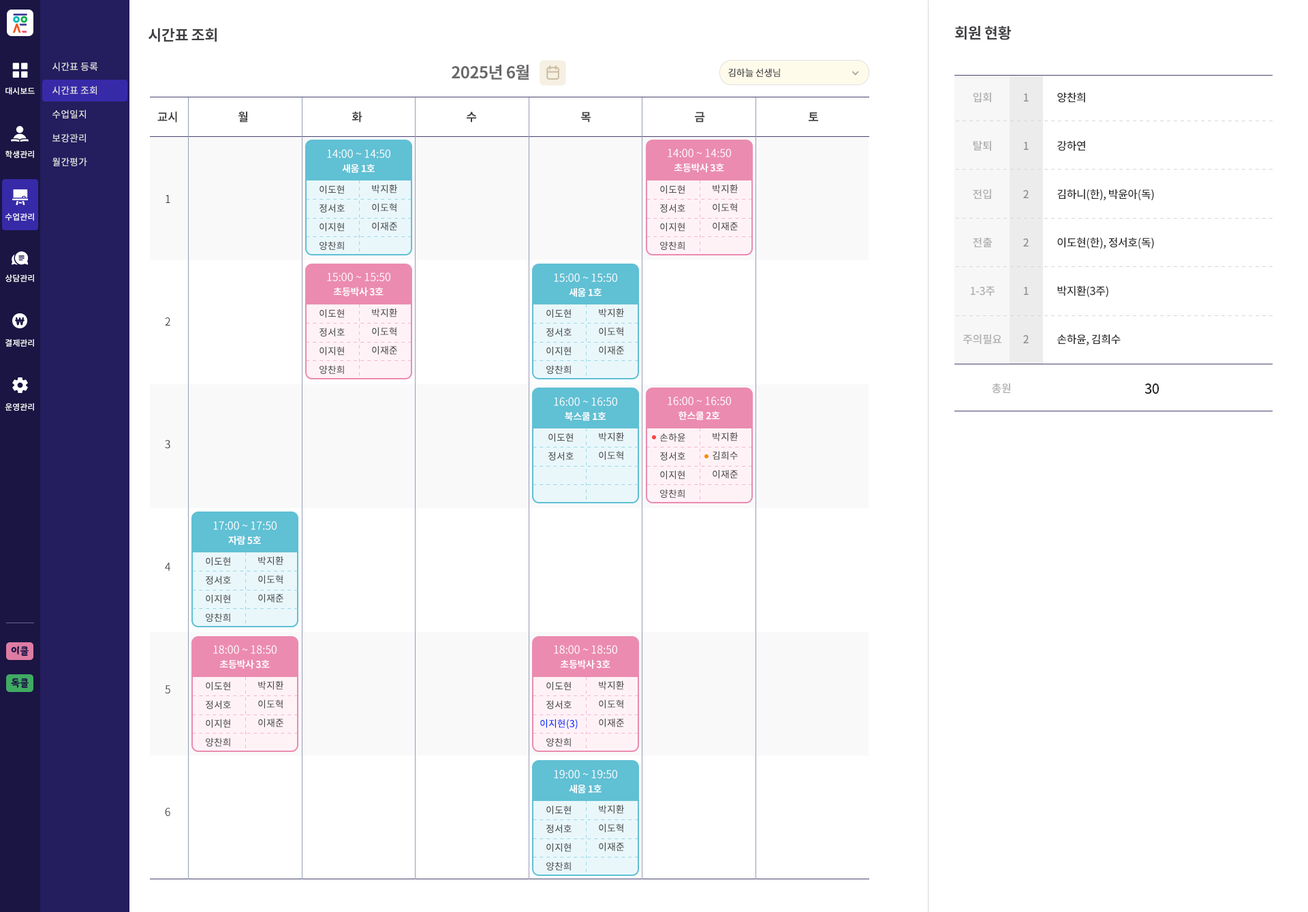
<style>
.page{position:relative;width:1308px;height:912px;background:#ffffff}
.page>*{position:absolute;margin:0}
.t1{font:15px "NotoSansCJKkr-Bold";letter-spacing:-0.025em;color:#3e3e43;text-transform:uppercase}
.t2{font:9.5px/23.8px "NotoSansCJKkr-Medium";color:#e1e1e1}
.t3{font:16.3px "NotoSansCJKkr-Bold";letter-spacing:-0.025em;color:#686868}
.t4{font:9.5px "NotoSansCJKkr-Medium";letter-spacing:-0.025em;color:#323232}
.t5{font:8.2px "NotoSansCJKkr-Medium";color:#ffffff}
.t6{font:10.9px/48.4px "NotoSansCJKkr-Medium";letter-spacing:-0.025em;color:#adadad}
.t7{font:10.9px/48.4px "NotoSansCJKkr-Medium";letter-spacing:-0.025em;color:#8f8f8f}
.t8{font:10.9px/48.4px "NotoSansCJKkr-Medium";letter-spacing:-0.025em;color:#323232}
.t9{font:11.6px "NotoSansCJKkr-Bold";letter-spacing:-0.025em;color:#404040}
.t10{font:10.9px "NotoSansCJKkr-DemiLight";color:#ffffff}
.t11{font:9.5px "NotoSansCJKkr-Bold";letter-spacing:-0.025em;color:#ffffff}
.t12{font:9.5px/18.7px "NotoSansCJKkr-Medium";color:#4d4d4d}
.t13{font:10.9px/122.6px "NotoSansCJKkr-Regular";letter-spacing:-0.025em;color:#404040}
.t14{font:10.9px "NotoSansCJKkr-Medium";letter-spacing:-0.025em;color:#adadad}
.t15{font:13.6px "NotoSansCJKkr-Medium";letter-spacing:-0.025em;color:#1f1f1f}
.t16{font:9.5px "YoonSoftSlime";color:#1a1543}
.t17{font:9.5px/18.7px "NotoSansCJKkr-Medium";color:#002aff}
</style>
<div class="page">
<p class="t1" style="left:148px;top:28px;width:69px;height:14px">시간표 조회</p>
<p class="t1" style="left:955px;top:26px;width:56px;height:14px">회원 현황</p>
<p class="t2" style="left:52px;top:62px;width:46px;height:104px">시간표 등록<br>시간표 조회<br>수업일지<br>보강관리<br>월간평가</p>
<p class="t3" style="left:452px;top:65px;width:77px;height:15px">2025년 6월</p>
<p class="t4" style="left:728px;top:68px;width:52px;height:9px">김하늘 선생님</p>
<p class="t5" style="left:5px;top:87px;width:30px;height:8px">대시보드</p>
<p class="t6" style="left:963px;top:92px;width:38px;height:253px;text-align:center">입회<br>탈퇴<br>전입<br>전출<br>1-3주<br>주의필요</p>
<p class="t7" style="left:1023px;top:93px;width:5px;height:250px;text-align:center">1<br>1<br>2<br>2<br>1<br>2</p>
<p class="t8" style="left:1057px;top:92px;width:97px;height:254px">양찬희<br>강하연<br>김하니(한), 박윤아(독)<br>이도현(한), 정서호(독)<br>박지환(3주)<br>손하윤, 김희수</p>
<p class="t9" style="left:157px;top:111px;width:20px;height:12px">교시</p>
<p class="t9" style="left:238px;top:111px;width:10px;height:12px">월</p>
<p class="t9" style="left:352px;top:111px;width:10px;height:12px">화</p>
<p class="t9" style="left:467px;top:112px;width:10px;height:11px">수</p>
<p class="t9" style="left:581px;top:112px;width:9px;height:11px">목</p>
<p class="t9" style="left:695px;top:112px;width:10px;height:11px">금</p>
<p class="t9" style="left:808px;top:112px;width:10px;height:9px">토</p>
<p class="t10" style="left:327px;top:149px;width:63px;height:9px">14:00 ~ 14:50</p>
<p class="t10" style="left:667px;top:148px;width:64px;height:9px">14:00 ~ 14:50</p>
<p class="t5" style="left:5px;top:151px;width:29px;height:7px">학생관리</p>
<p class="t11" style="left:342px;top:164px;width:33px;height:9px">새움 1호</p>
<p class="t11" style="left:674px;top:163px;width:50px;height:9px">초등박사 3호</p>
<p class="t12" style="left:319px;top:185px;width:26px;height:65px;text-align:center">이도현<br>정서호<br>이지현<br>양찬희</p>
<p class="t12" style="left:372px;top:184px;width:25px;height:47px;text-align:center">박지환<br>이도혁<br>이재준</p>
<p class="t12" style="left:660px;top:185px;width:25px;height:65px;text-align:center">이도현<br>정서호<br>이지현<br>양찬희</p>
<p class="t12" style="left:712px;top:184px;width:26px;height:47px;text-align:center">박지환<br>이도혁<br>이재준</p>
<p class="t13" style="left:165px;top:195px;width:5px;height:622px;text-align:center">1<br>2<br>3<br>4<br>5<br>6</p>
<p class="t5" style="left:5px;top:213px;width:29px;height:8px">수업관리</p>
<p class="t5" style="left:5px;top:274px;width:29px;height:8px">상담관리</p>
<p class="t10" style="left:327px;top:272px;width:63px;height:9px">15:00 ~ 15:50</p>
<p class="t10" style="left:554px;top:273px;width:63px;height:9px">15:00 ~ 15:50</p>
<p class="t11" style="left:333px;top:287px;width:50px;height:9px">초등박사 3호</p>
<p class="t11" style="left:569px;top:288px;width:32px;height:9px">새움 1호</p>
<p class="t12" style="left:319px;top:309px;width:26px;height:65px;text-align:center">이도현<br>정서호<br>이지현<br>양찬희</p>
<p class="t12" style="left:372px;top:308px;width:25px;height:47px;text-align:center">박지환<br>이도혁<br>이재준</p>
<p class="t12" style="left:546px;top:309px;width:25px;height:65px;text-align:center">이도현<br>정서호<br>이지현<br>양찬희</p>
<p class="t12" style="left:599px;top:308px;width:25px;height:47px;text-align:center">박지환<br>이도혁<br>이재준</p>
<p class="t5" style="left:5px;top:339px;width:29px;height:8px">결제관리</p>
<p class="t14" style="left:992px;top:383px;width:18px;height:11px">총원</p>
<p class="t15" style="left:1144px;top:383px;width:14px;height:11px">30</p>
<p class="t10" style="left:554px;top:397px;width:63px;height:9px">16:00 ~ 16:50</p>
<p class="t10" style="left:667px;top:396px;width:64px;height:9px">16:00 ~ 16:50</p>
<p class="t5" style="left:5px;top:403px;width:29px;height:8px">운영관리</p>
<p class="t11" style="left:565px;top:412px;width:41px;height:9px">북스쿨 1호</p>
<p class="t11" style="left:678px;top:411px;width:42px;height:9px">한스쿨 2호</p>
<p class="t12" style="left:548px;top:433px;width:25px;height:27px;text-align:center">이도현<br>정서호</p>
<p class="t12" style="left:599px;top:432px;width:25px;height:28px;text-align:center">박지환<br>이도혁</p>
<p class="t12" style="left:659px;top:433px;width:26px;height:65px;text-align:center">손하윤<br>정서호<br>이지현<br>양찬희</p>
<p class="t12" style="left:712px;top:432px;width:26px;height:47px;text-align:center">박지환<br>김희수<br>이재준</p>
<p class="t10" style="left:213px;top:521px;width:64px;height:9px">17:00 ~ 17:50</p>
<p class="t11" style="left:228px;top:535px;width:33px;height:10px">자람 5호</p>
<p class="t12" style="left:206px;top:557px;width:25px;height:65px;text-align:center">이도현<br>정서호<br>이지현<br>양찬희</p>
<p class="t12" style="left:258px;top:556px;width:25px;height:47px;text-align:center">박지환<br>이도혁<br>이재준</p>
<p class="t16" style="left:11px;top:646px;width:18px;height:10px">이클</p>
<p class="t10" style="left:213px;top:645px;width:64px;height:9px">18:00 ~ 18:50</p>
<p class="t10" style="left:554px;top:645px;width:63px;height:9px">18:00 ~ 18:50</p>
<p class="t11" style="left:219px;top:659px;width:51px;height:10px">초등박사 3호</p>
<p class="t11" style="left:560px;top:659px;width:50px;height:10px">초등박사 3호</p>
<p class="t16" style="left:11px;top:678px;width:18px;height:10px">독클</p>
<p class="t12" style="left:206px;top:682px;width:25px;height:64px;text-align:center">이도현<br>정서호<br>이지현<br>양찬희</p>
<p class="t12" style="left:258px;top:680px;width:25px;height:47px;text-align:center">박지환<br>이도혁<br>이재준</p>
<p class="t12" style="left:540px;top:682px;width:38px;height:64px;text-align:center">이도현<br>정서호<br><span class="t17">이지현(3)<br></span>양찬희</p>
<p class="t12" style="left:599px;top:680px;width:25px;height:47px;text-align:center">박지환<br>이도혁<br>이재준</p>
<p class="t10" style="left:554px;top:770px;width:63px;height:8px">19:00 ~ 19:50</p>
<p class="t11" style="left:569px;top:785px;width:32px;height:8px">새움 1호</p>
<p class="t12" style="left:546px;top:806px;width:25px;height:64px;text-align:center">이도현<br>정서호<br>이지현<br>양찬희</p>
<p class="t12" style="left:599px;top:804px;width:25px;height:47px;text-align:center">박지환<br>이도혁<br>이재준</p>
</div>
